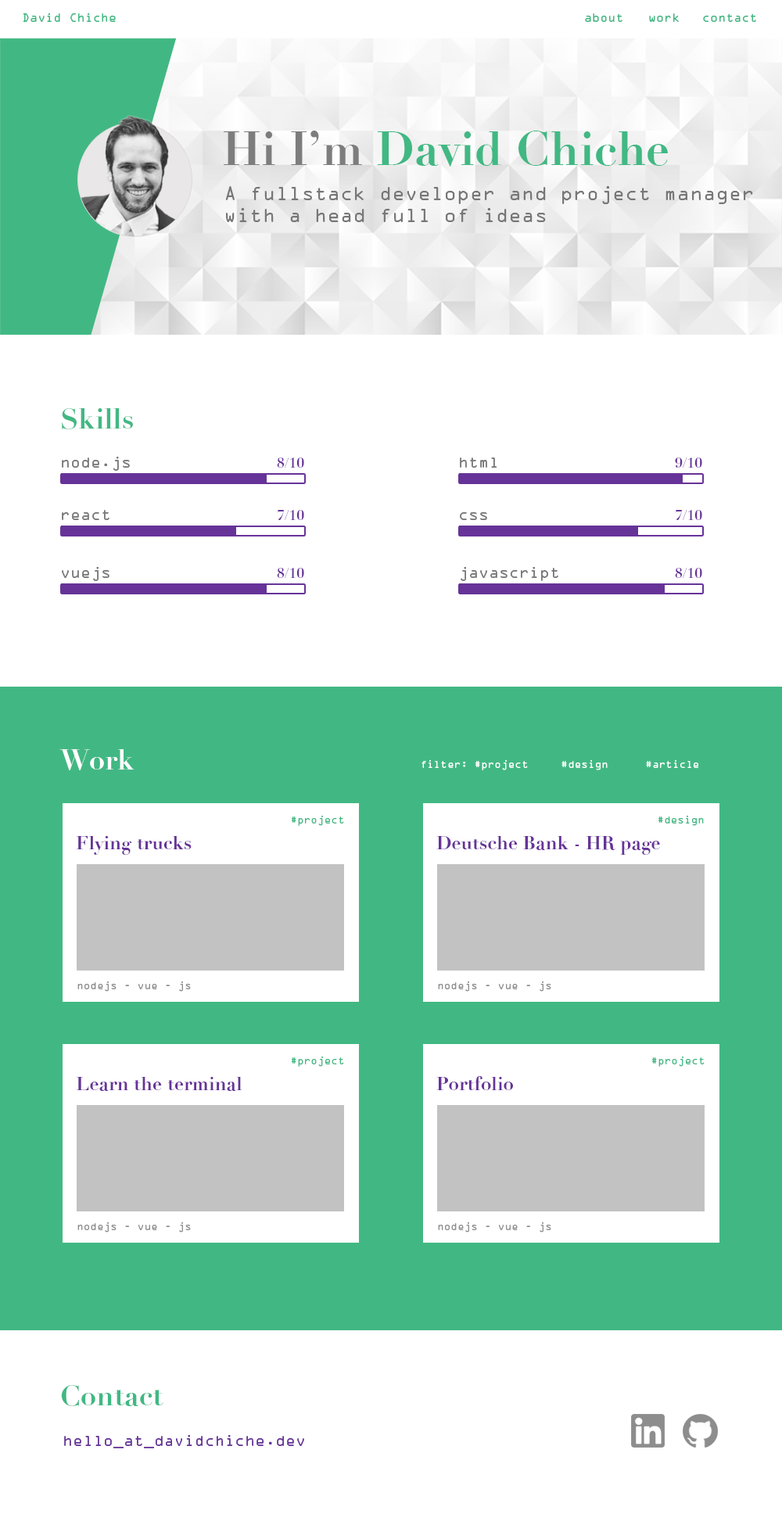
<style>
.page{position:relative;width:782px;height:1525px;background:#ffffff}
.page>*{position:absolute;margin:0}
.t1{font:10.9px "OCRAStd";color:#41b883}
.t2{font:46.9px "Didot-Bold";color:#41b883}
.t3{font:46.9px "Didot-Bold";color:#7d7d7d}
.t4{font:18px "OCRAStd";color:#777777}
.t5{font:28.2px "Didot-Bold";color:#41b883}
.t6{font:14.1px "OCRAStd";color:#777777}
.t7{font:14.1px "Didot-Bold";color:#663398}
.t8{font:28.2px "Didot-Bold";color:#ffffff}
.t9{font:9.4px "OCRAStd";color:#ffffff}
.t10{font:9.4px "OCRAStd";color:#41b883}
.t11{font:18.8px "Didot-Bold";color:#663398}
.t12{font:9.4px "OCRAStd";color:#8d8d8d}
.t13{font:14.1px "OCRAStd";color:#663398}
</style>
<div class="page">
<p class="t1" style="left:23px;top:13px;width:93px;height:9px">David Chiche</p>
<p class="t1" style="left:585px;top:13px;width:37px;height:9px">about</p>
<p class="t1" style="left:649px;top:13px;width:30px;height:9px">work</p>
<p class="t1" style="left:703px;top:13px;width:53px;height:9px">contact</p>
<p class="t2" style="left:224px;top:131px;width:444px;height:36px"><span class="t3">Hi I’m </span>David Chiche</p>
<p class="t4" style="left:225px;top:186px;width:528px;height:36px">A fullstack developer and project manager <br>with a head full of ideas</p>
<p class="t5" style="left:62px;top:408px;width:71px;height:21px">Skills</p>
<p class="t6" style="left:62px;top:457px;width:68px;height:14px">node.js</p>
<p class="t7" style="left:277px;top:457px;width:27px;height:11px">8/10</p>
<p class="t6" style="left:460px;top:457px;width:37px;height:11px">html</p>
<p class="t7" style="left:675px;top:457px;width:27px;height:11px">9/10</p>
<p class="t6" style="left:62px;top:510px;width:47px;height:10px">react</p>
<p class="t7" style="left:278px;top:510px;width:26px;height:10px">7/10</p>
<p class="t7" style="left:676px;top:510px;width:26px;height:10px">7/10</p>
<p class="t6" style="left:460px;top:512px;width:27px;height:8px">css</p>
<p class="t6" style="left:62px;top:567px;width:47px;height:14px">vuejs</p>
<p class="t7" style="left:277px;top:568px;width:27px;height:10px">8/10</p>
<p class="t6" style="left:461px;top:567px;width:97px;height:14px">javascript</p>
<p class="t7" style="left:675px;top:568px;width:27px;height:10px">8/10</p>
<p class="t8" style="left:59px;top:749px;width:76px;height:21px">Work</p>
<p class="t9" style="left:421px;top:760px;width:277px;height:10px">filter: #project  #design  #article</p>
<p class="t10" style="left:291px;top:816px;width:53px;height:10px">#project</p>
<p class="t10" style="left:658px;top:816px;width:46px;height:10px">#design</p>
<p class="t11" style="left:76px;top:836px;width:116px;height:19px">Flying trucks</p>
<p class="t11" style="left:436px;top:836px;width:224px;height:19px">Deutsche Bank - HR page</p>
<p class="t12" style="left:77px;top:981px;width:114px;height:11px">nodejs - vue - js</p>
<p class="t12" style="left:438px;top:981px;width:113px;height:11px">nodejs - vue - js</p>
<p class="t10" style="left:291px;top:1056px;width:53px;height:11px">#project</p>
<p class="t10" style="left:651px;top:1056px;width:54px;height:11px">#project</p>
<p class="t11" style="left:77px;top:1077px;width:165px;height:14px">Learn the terminal</p>
<p class="t11" style="left:436px;top:1076px;width:77px;height:14px">Portfolio</p>
<p class="t12" style="left:77px;top:1222px;width:114px;height:10px">nodejs - vue - js</p>
<p class="t12" style="left:438px;top:1222px;width:113px;height:10px">nodejs - vue - js</p>
<p class="t5" style="left:61px;top:1385px;width:102px;height:21px">Contact</p>
<p class="t13" style="left:64px;top:1435px;width:240px;height:13px">hello_at_davidchiche.dev</p>
</div>
